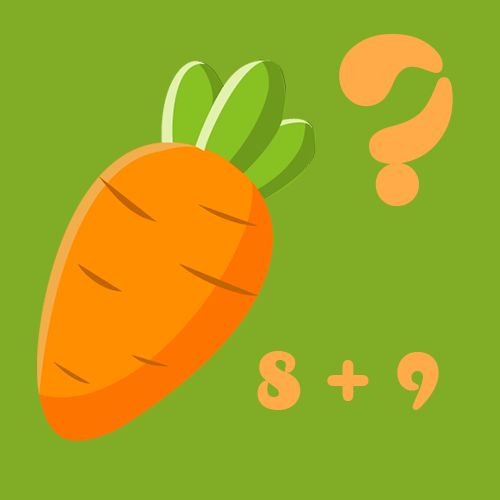
<style>
.page{position:relative;width:500px;height:500px;background:#81ad26}
.page>*{position:absolute;margin:0}
.t1{font:250px "UVNBanhMi";color:#ffab49}
.t2{font:85px "UVNBanhMi";color:#ffab49}
</style>
<div class="page">
<p class="t1" style="left:339px;top:34px;width:114px;height:172px">?</p>
<p class="t2" style="left:257px;top:351px;width:182px;height:59px">8 + 9</p>
</div>
